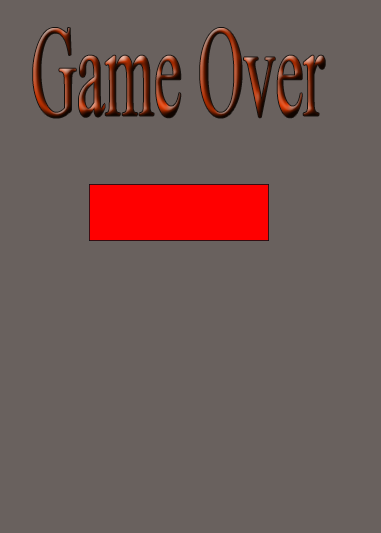
<style>
.page{position:relative;width:381px;height:533px;background:#69615e}
.page>*{position:absolute;margin:0}
.t1{font:129.2px "TimesNewRomanPSMT";scale:0.49 1}
</style>
<div class="page">
<p class="t1" style="left:33px;top:28px;width:292px;height:90px">Game Over</p>
</div>
